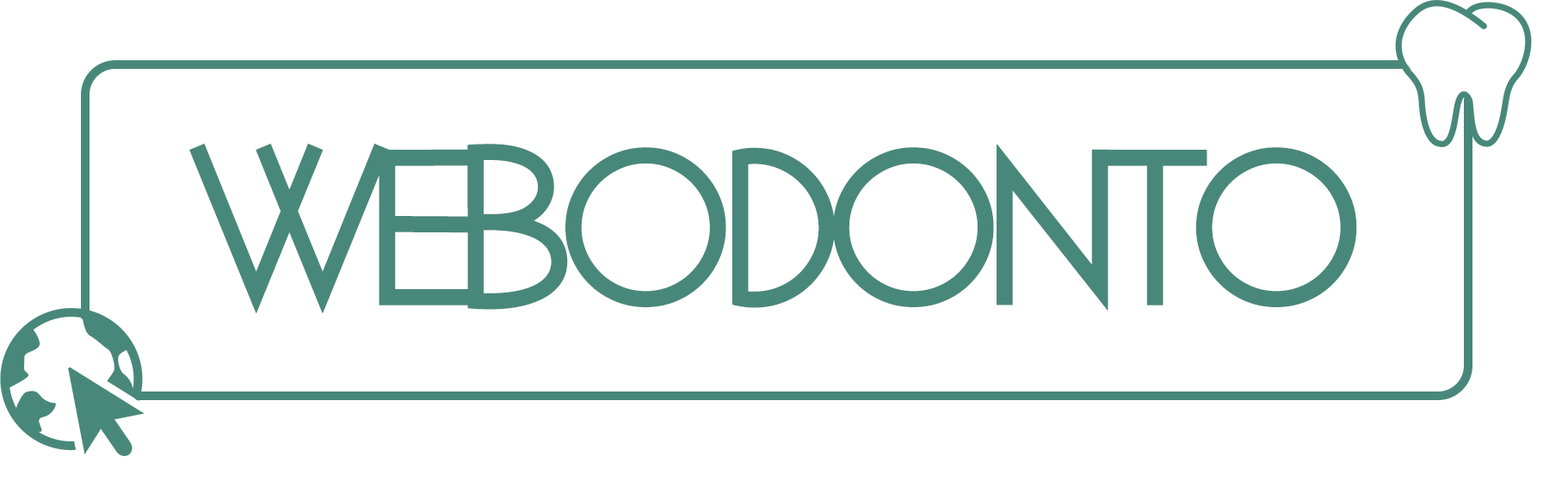
<style>
.page{position:relative;width:1568px;height:481px;background:#ffffff}
.page>*{position:absolute;margin:0}
.t1{font:221.3px "DjringRegular";letter-spacing:-0.1em;color:#48887a;text-transform:uppercase;font-weight:bold}
</style>
<div class="page">
<p class="t1" style="left:189px;top:144px;width:1168px;height:169px">WebOdonto</p>
</div>
